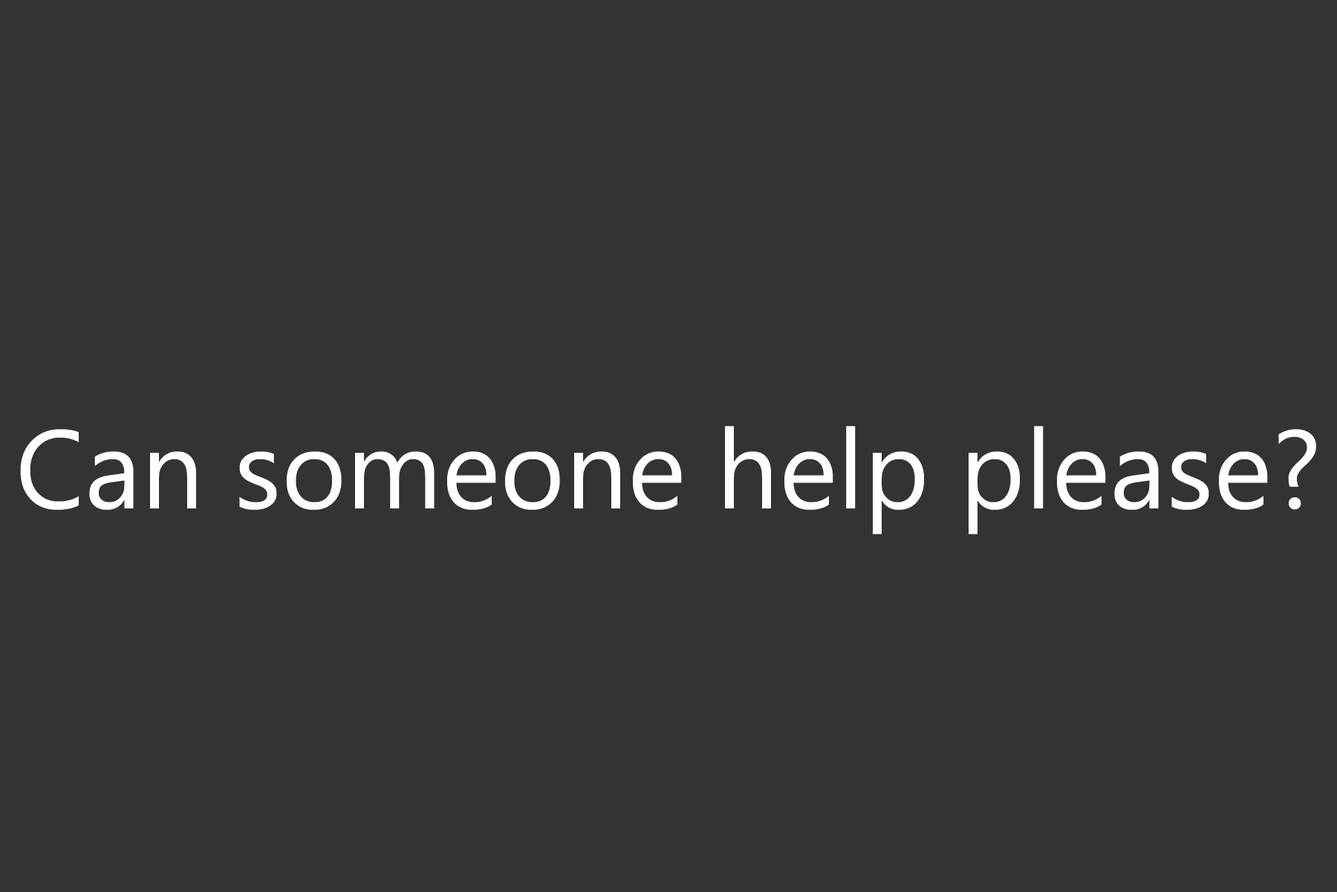
<style>
.page{position:relative;width:1337px;height:892px;background:#333333}
.page>*{position:absolute;margin:0}
.t1{font:111px "NirmalaUI";color:#ffffff}
</style>
<div class="page">
<p class="t1" style="left:20px;top:426px;width:1297px;height:108px">Can someone help please?</p>
</div>
